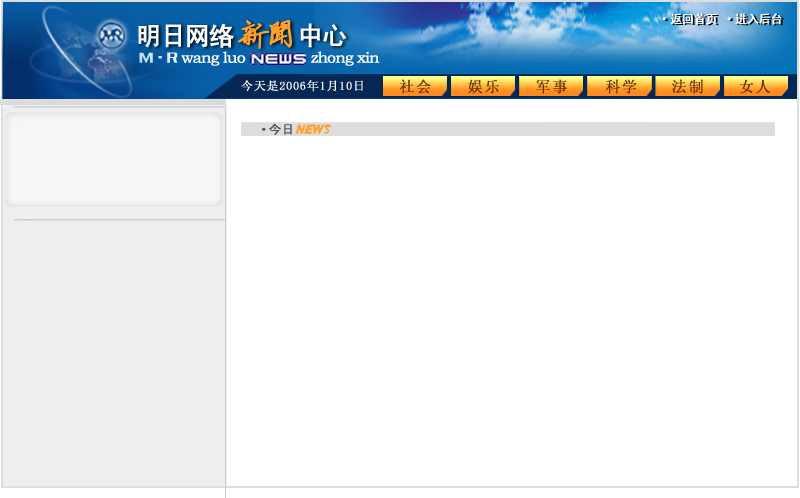
<style>
.page{position:relative;width:800px;height:498px;background:#ffffff}
.page>*{position:absolute;margin:0}
.t1{font:12px "SimHei";letter-spacing:-0.04em;color:#ffffff;font-weight:bold}
.t2{font:25.7px "SimHei";letter-spacing:-0.08em;color:#ffffff;font-weight:bold}
.t3{font:32.6px "FZYBXSFW--GB1-0";letter-spacing:-0.08em;color:#ffa02b;font-weight:bold}
.t4{font:25.7px "SimSun";letter-spacing:-0.08em;color:#ffa02b;font-weight:bold}
.t5{font:15.3px "STZhongsong";letter-spacing:-0.06em;color:#ffffff;font-weight:bold}
.t6{font:15.3px "FZCQFW--GB1-0";letter-spacing:-0.06em;color:#ffffff;font-weight:bold}
.t7{font:11.7px "SimSun";letter-spacing:0.06em;color:#ffffff;font-weight:bold}
.t8{font:15px "SimSun";letter-spacing:0.1em;color:#6b3000;font-weight:bold}
</style>
<div class="page">
<p class="t1" style="left:662px;top:13px;width:120px;height:12px">·返回首页 ·进入后台</p>
<p class="t2" style="left:138px;top:23px;width:209px;height:25px">明日网络     中心</p>
<p class="t3" style="left:238px;top:19px;width:54px;height:30px"><span class="t4">         </span>新闻</p>
<p class="t5" style="left:139px;top:51px;width:241px;height:15px"><span class="t6">M·R</span> wang luo               zhong xin</p>
<p class="t7" style="left:241px;top:80px;width:122px;height:12px">今天是2006年1月10日</p>
<p class="t8" style="left:399px;top:79px;width:372px;height:15px">社会    娱乐    军事    科学    法制    女人</p>
</div>
